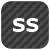
<style>
.page{position:relative;width:50px;height:50px}
.page>*{position:absolute;margin:0}
.t1{font:19px "Verdana-Bold";color:#ffffff}
</style>
<div class="page">
<p class="t1" style="left:13px;top:18px;width:26px;height:14px">SS</p>
</div>
